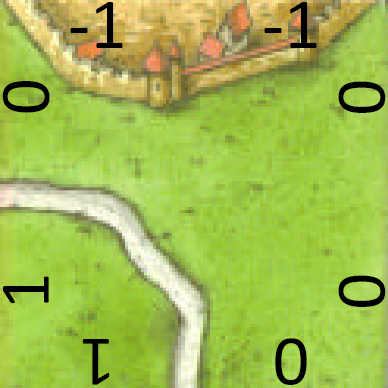
<style>
.page{position:relative;width:388px;height:388px}
.page>*{position:absolute;margin:0}
.t1{font:72px "Calibri";color:#000000}
.t2{font:71.8px "Calibri";color:#000000}
</style>
<div class="page">
<p class="t1" style="left:70px;top:2px;width:53px;height:46px">-1</p>
<p class="t1" style="left:264px;top:2px;width:53px;height:46px">-1</p>
<p class="t2" style="left:2px;top:81px;width:48px;height:32px;rotate:-90deg">0</p>
<p class="t2" style="left:338px;top:81px;width:48px;height:32px;rotate:90deg">0</p>
<p class="t2" style="left:3px;top:276px;width:46px;height:27px;rotate:-90deg">1</p>
<p class="t2" style="left:338px;top:275px;width:48px;height:32px;rotate:90deg">0</p>
<p class="t2" style="left:82px;top:339px;width:28px;height:46px;rotate:180deg">1</p>
<p class="t2" style="left:275px;top:338px;width:32px;height:47px;rotate:180deg">0</p>
</div>
